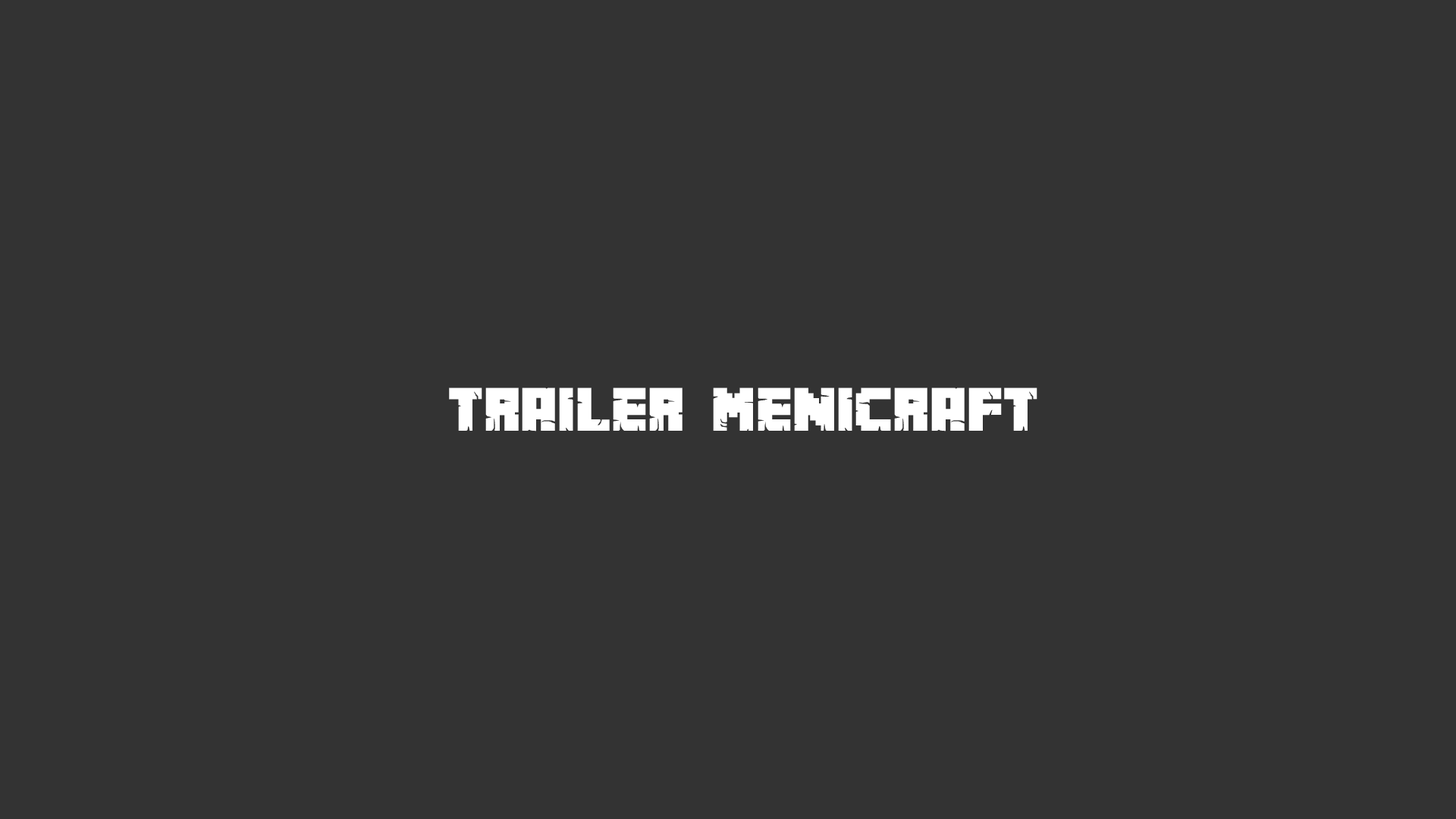
<style>
.page{position:relative;width:1456px;height:819px;background:#333333}
.page>*{position:absolute;margin:0}
.t1{font:54.6px "MinecrafterAlt";color:#ffffff}
</style>
<div class="page">
<p class="t1" style="left:449px;top:388px;width:588px;height:43px">TRAILER MENICRAFT</p>
</div>
